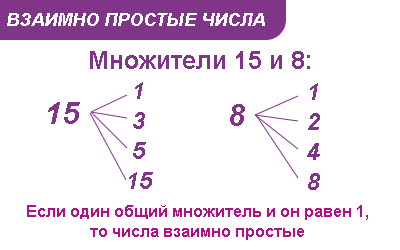
<style>
.page{position:relative;width:400px;height:250px;background:#ffffff}
.page>*{position:absolute;margin:0}
.t1{font:18px "Arial-BoldItalicMT";color:#ffffff}
.t2{font:25px "Arial-BoldMT";color:#813589}
.t3{font:24px/24px "Arial-BoldItalicMT";color:#813589}
.t4{font:30px "Arial-BoldItalicMT";color:#813589}
.t5{font:16px/14px "Arial-BoldMT";color:#b01189}
</style>
<div class="page">
<p class="t1" style="left:7px;top:13px;width:258px;height:13px">ВЗАИМНО ПРОСТЫЕ ЧИСЛА</p>
<p class="t2" style="left:90px;top:51px;width:220px;height:18px">Множители 15 и 8:</p>
<p class="t3" style="left:129px;top:82px;width:24px;height:107px;text-align:center">1<br>3<br>5<br>15</p>
<p class="t3" style="left:307px;top:83px;width:13px;height:107px;text-align:center">1<br>2<br>4<br>8</p>
<p class="t4" style="left:48px;top:102px;width:32px;height:22px">15</p>
<p class="t4" style="left:230px;top:104px;width:15px;height:22px">8</p>
<p class="t5" style="left:27px;top:205px;width:341px;height:35px;text-align:center">Если один общий множитель и он равен 1,<br>то числа взаимно простые</p>
</div>
